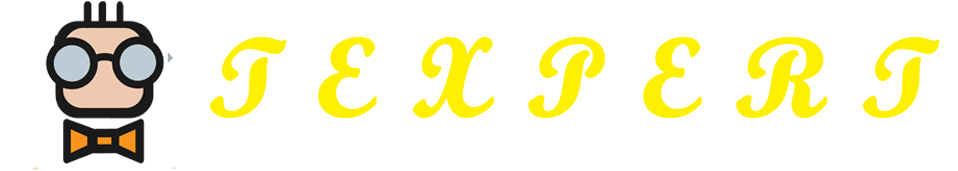
<style>
.page{position:relative;width:958px;height:171px;background:#ffffff}
.page>*{position:absolute;margin:0}
.t1{font:111.9px "ScriptMTBold";letter-spacing:0.3em;color:#fff000;font-weight:bold}
</style>
<div class="page">
<p class="t1" style="left:209px;top:36px;width:731px;height:83px">TEXPERT</p>
</div>
